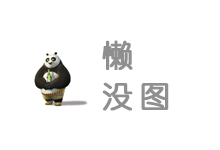
<style>
.page{position:relative;width:220px;height:150px;background:#ffffff}
.page>*{position:absolute;margin:0}
.t1{font:30px/41px "STYuanti-TC-Regular";letter-spacing:0.22em;color:#8f8f8f;font-weight:bold}
</style>
<div class="page">
<p class="t1" style="left:102px;top:40px;width:67px;height:71px">懒<br>没图</p>
</div>
